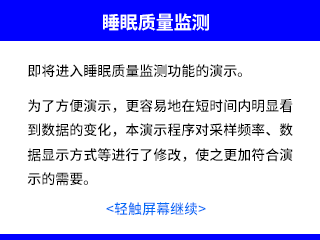
<style>
.page{position:relative;width:320px;height:240px;background:#ffffff}
.page>*{position:absolute;margin:0}
.t1{font:18px "SourceHanSansSC-Bold";color:#ffffff}
.t2{font:14px "SourceHanSansSC-Medium";color:#000000}
.t3{font:14px "SourceHanSansSC-Medium";color:#0069f6}
</style>
<div class="page">
<p class="t1" style="left:103px;top:13px;width:106px;height:18px">睡眠质量监测</p>
<p class="t2" style="left:27px;top:64px;width:266px;height:122px">即将进入睡眠质量监测功能的演示。<br> <br>为了方便演示，更容易地在短时间内明显看<br>到数据的变化，本演示程序对采样频率、数<br>据显示方式等进行了修改，使之更加符合演<br>示的需要。</p>
<p class="t3" style="left:106px;top:202px;width:100px;height:14px">&lt;轻触屏幕继续&gt;</p>
</div>
